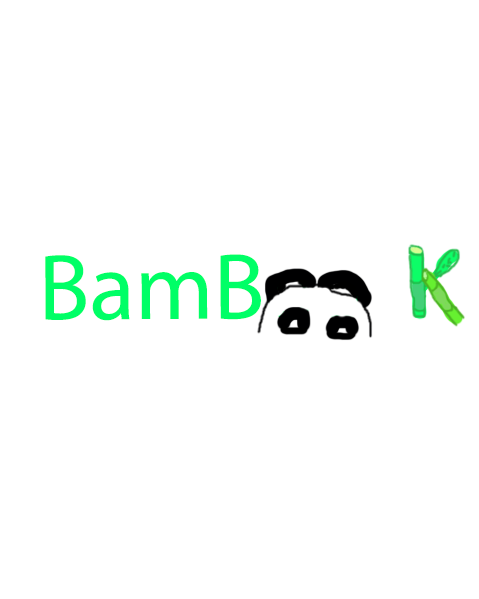
<style>
.page{position:relative;width:479px;height:599px;background:#ffffff}
.page>*{position:absolute;margin:0}
.t1{font:94.3px "MyriadPro-Regular";color:#00ff66}
</style>
<div class="page">
<p class="t1" style="left:45px;top:254px;width:416px;height:67px">BamBoo  K</p>
</div>
